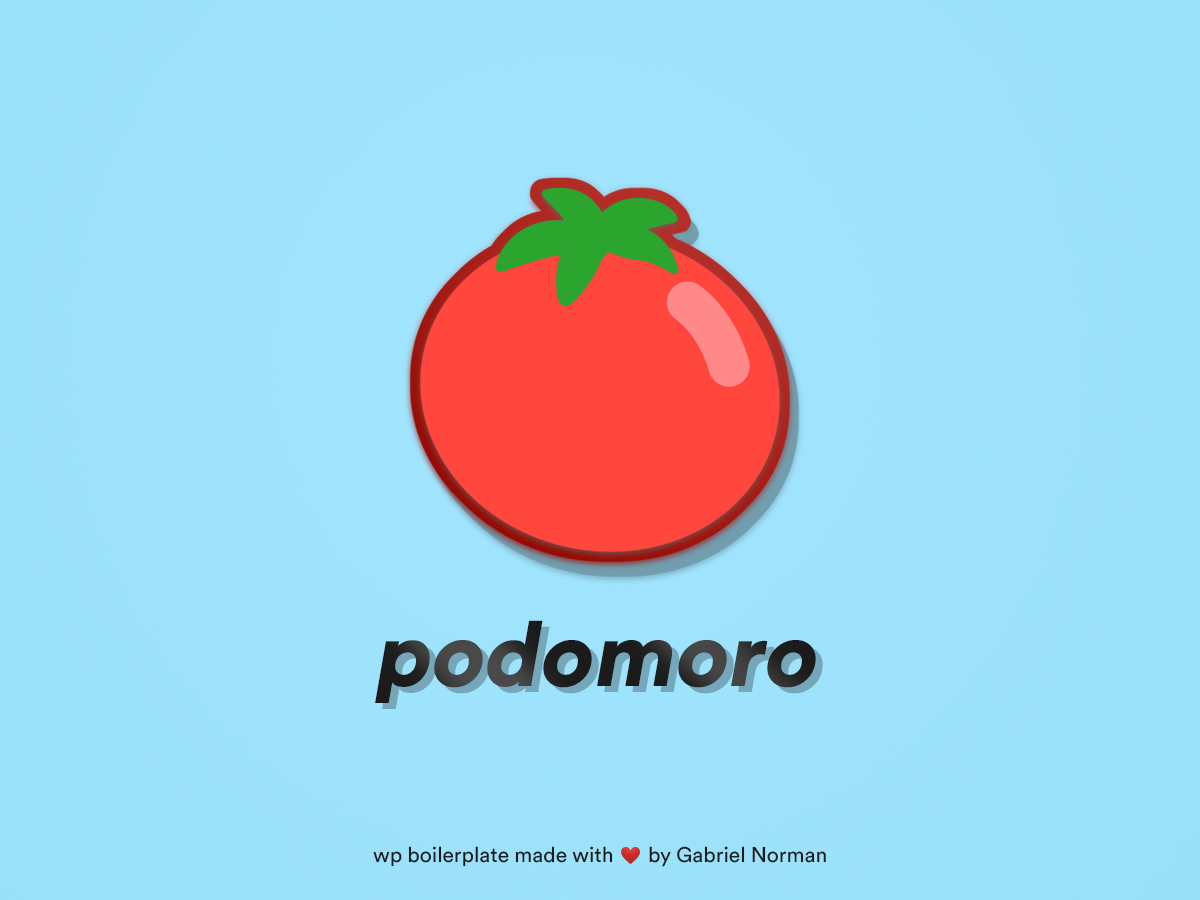
<style>
.page{position:relative;width:1200px;height:900px}
.page>*{position:absolute;margin:0}
.t1{font:90px "CircularStd-Black";color:#1b1b1b;font-style:italic}
.t2{font:90px "CircularStd-Black";font-style:italic}
.t3{font:21px "CircularStd-Book";color:#1b1b1b}
.t4{font:21px "CircularStd-Book";color:#1c1c1c}
</style>
<div class="page">
<p class="t1" style="left:375px;top:620px;width:441px;height:83px">podomoro</p>
<p class="t2" style="left:382px;top:626px;width:441px;height:83px">podomoro</p>
<p class="t3" style="left:373px;top:846px;width:240px;height:21px">wp boilerplate made with</p>
<p class="t4" style="left:649px;top:846px;width:177px;height:21px">by Gabriel Norman</p>
</div>
